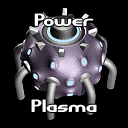
<style>
.page{position:relative;width:128px;height:128px;background:#000000}
.page>*{position:absolute;margin:0}
.t1{font:18px "GravitateBRK";color:#ffffff}
</style>
<div class="page">
<p class="t1" style="left:34px;top:13px;width:60px;height:13px">Power</p>
<p class="t1" style="left:31px;top:99px;width:66px;height:13px">Plasma</p>
</div>
